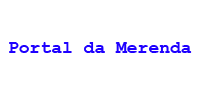
<style>
.page{position:relative;width:200px;height:100px;background:#ffffff}
.page>*{position:absolute;margin:0}
.t1{font:18px "CourierNewPS-BoldMT";color:#1e00ff}
</style>
<div class="page">
<p class="t1" style="left:9px;top:42px;width:183px;height:11px">Portal da Merenda</p>
</div>
